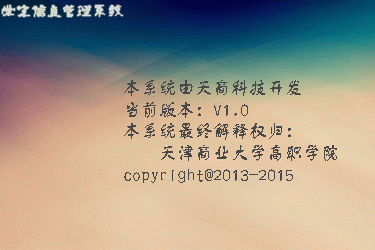
<style>
.page{position:relative;width:375px;height:250px}
.page>*{position:absolute;margin:0}
.t1{font:15.3px "-";color:#d5d9df}
.t2{font:18px "ShutontiCSEG-Bold-GB";color:#494848}
</style>
<div class="page">
<p class="t1" style="left:2px;top:5px;width:121px;height:12px">学生信息管理系统</p>
<p class="t2" style="left:124px;top:80px;width:213px;height:103px">本系统由天商科技开发<br>当前版本：V1.0<br>本系统最终解释权归：<br> 天津商业大学高职学院<br>copyright@2013-2015</p>
</div>
